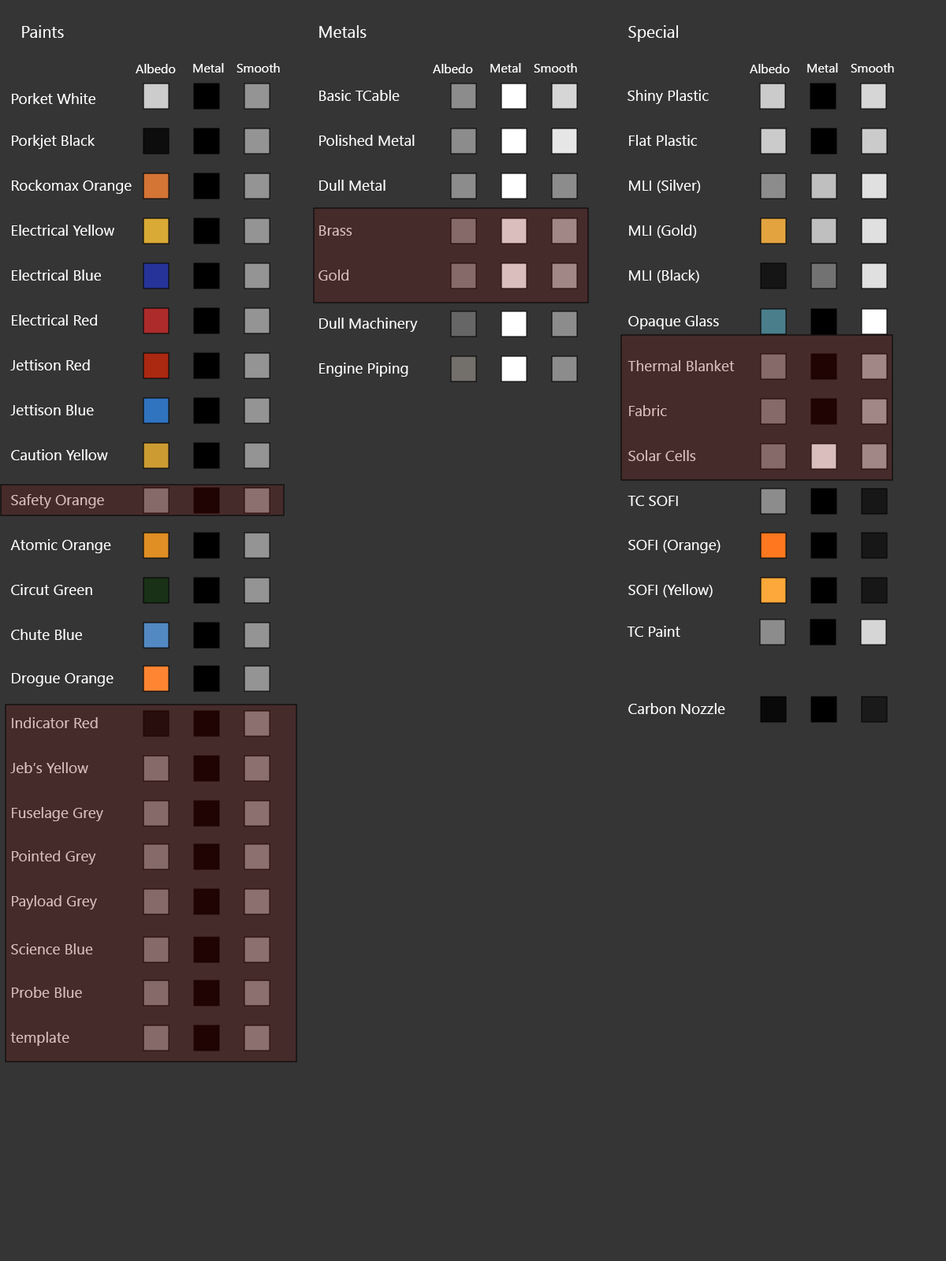
<style>
.page{position:relative;width:946px;height:1261px;background:#353535}
.page>*{position:absolute;margin:0}
.t1{font:16.5px "SegoeUI";color:#ffffff}
.t2{font:12.6px "SegoeUI";color:#ffffff}
.t3{font:15px "SegoeUI";color:#ffffff}
.t4{font:15px "SegoeUI";color:#dabebe}
</style>
<div class="page">
<p class="t1" style="left:22px;top:25px;width:42px;height:13px">Paints</p>
<p class="t1" style="left:319px;top:25px;width:47px;height:13px">Metals</p>
<p class="t1" style="left:628px;top:25px;width:50px;height:17px">Special</p>
<p class="t2" style="left:136px;top:64px;width:40px;height:9px">Albedo</p>
<p class="t2" style="left:193px;top:63px;width:31px;height:10px">Metal</p>
<p class="t2" style="left:236px;top:63px;width:44px;height:10px">Smooth</p>
<p class="t2" style="left:433px;top:64px;width:40px;height:9px">Albedo</p>
<p class="t2" style="left:490px;top:63px;width:31px;height:10px">Metal</p>
<p class="t2" style="left:534px;top:63px;width:43px;height:10px">Smooth</p>
<p class="t2" style="left:749px;top:64px;width:41px;height:9px">Albedo</p>
<p class="t2" style="left:807px;top:63px;width:31px;height:10px">Metal</p>
<p class="t2" style="left:850px;top:63px;width:44px;height:10px">Smooth</p>
<p class="t3" style="left:319px;top:90px;width:81px;height:11px">Basic TCable</p>
<p class="t3" style="left:627px;top:90px;width:81px;height:14px">Shiny Plastic</p>
<p class="t3" style="left:12px;top:93px;width:83px;height:11px">Porket White</p>
<p class="t3" style="left:12px;top:135px;width:83px;height:14px">Porkjet Black</p>
<p class="t3" style="left:319px;top:135px;width:96px;height:11px">Polished Metal</p>
<p class="t3" style="left:629px;top:135px;width:68px;height:11px">Flat Plastic</p>
<p class="t3" style="left:12px;top:180px;width:120px;height:14px">Rockomax Orange</p>
<p class="t3" style="left:319px;top:180px;width:66px;height:11px">Dull Metal</p>
<p class="t3" style="left:629px;top:180px;width:72px;height:13px">MLI (Silver)</p>
<p class="t3" style="left:12px;top:225px;width:102px;height:11px">Electrical Yellow</p>
<p class="t4" style="left:319px;top:225px;width:33px;height:11px">Brass</p>
<p class="t3" style="left:629px;top:225px;width:68px;height:13px">MLI (Gold)</p>
<p class="t3" style="left:12px;top:270px;width:89px;height:11px">Electrical Blue</p>
<p class="t4" style="left:318px;top:270px;width:30px;height:11px">Gold</p>
<p class="t3" style="left:629px;top:270px;width:70px;height:13px">MLI (Black)</p>
<p class="t3" style="left:12px;top:314px;width:85px;height:11px">Electrical Red</p>
<p class="t3" style="left:319px;top:318px;width:99px;height:14px">Dull Machinery</p>
<p class="t3" style="left:628px;top:315px;width:91px;height:14px">Opaque Glass</p>
<p class="t3" style="left:10px;top:359px;width:80px;height:11px">Jettison Red</p>
<p class="t3" style="left:319px;top:363px;width:89px;height:14px">Engine Piping</p>
<p class="t4" style="left:627px;top:360px;width:107px;height:11px">Thermal Blanket</p>
<p class="t3" style="left:10px;top:404px;width:84px;height:11px">Jettison Blue</p>
<p class="t4" style="left:629px;top:405px;width:38px;height:11px">Fabric</p>
<p class="t3" style="left:11px;top:449px;width:97px;height:11px">Caution Yellow</p>
<p class="t4" style="left:628px;top:450px;width:68px;height:11px">Solar Cells</p>
<p class="t4" style="left:11px;top:494px;width:93px;height:14px">Safety Orange</p>
<p class="t3" style="left:627px;top:496px;width:51px;height:10px">TC SOFI</p>
<p class="t3" style="left:10px;top:539px;width:101px;height:14px">Atomic Orange</p>
<p class="t3" style="left:628px;top:540px;width:92px;height:13px">SOFI (Orange)</p>
<p class="t3" style="left:11px;top:584px;width:81px;height:11px">Circut Green</p>
<p class="t3" style="left:628px;top:584px;width:84px;height:13px">SOFI (Yellow)</p>
<p class="t3" style="left:11px;top:629px;width:71px;height:11px">Chute Blue</p>
<p class="t3" style="left:627px;top:626px;width:53px;height:11px">TC Paint</p>
<p class="t3" style="left:12px;top:673px;width:101px;height:13px">Drogue Orange</p>
<p class="t3" style="left:628px;top:703px;width:97px;height:11px">Carbon Nozzle</p>
<p class="t4" style="left:12px;top:717px;width:86px;height:11px">Indicator Red</p>
<p class="t4" style="left:10px;top:762px;width:78px;height:11px">Jeb’s Yellow</p>
<p class="t4" style="left:12px;top:807px;width:91px;height:14px">Fuselage Grey</p>
<p class="t4" style="left:12px;top:850px;width:84px;height:15px">Pointed Grey</p>
<p class="t4" style="left:12px;top:895px;width:85px;height:14px">Payload Grey</p>
<p class="t4" style="left:11px;top:943px;width:82px;height:11px">Science Blue</p>
<p class="t4" style="left:12px;top:987px;width:70px;height:11px">Probe Blue</p>
<p class="t4" style="left:10px;top:1032px;width:59px;height:14px">template</p>
</div>
